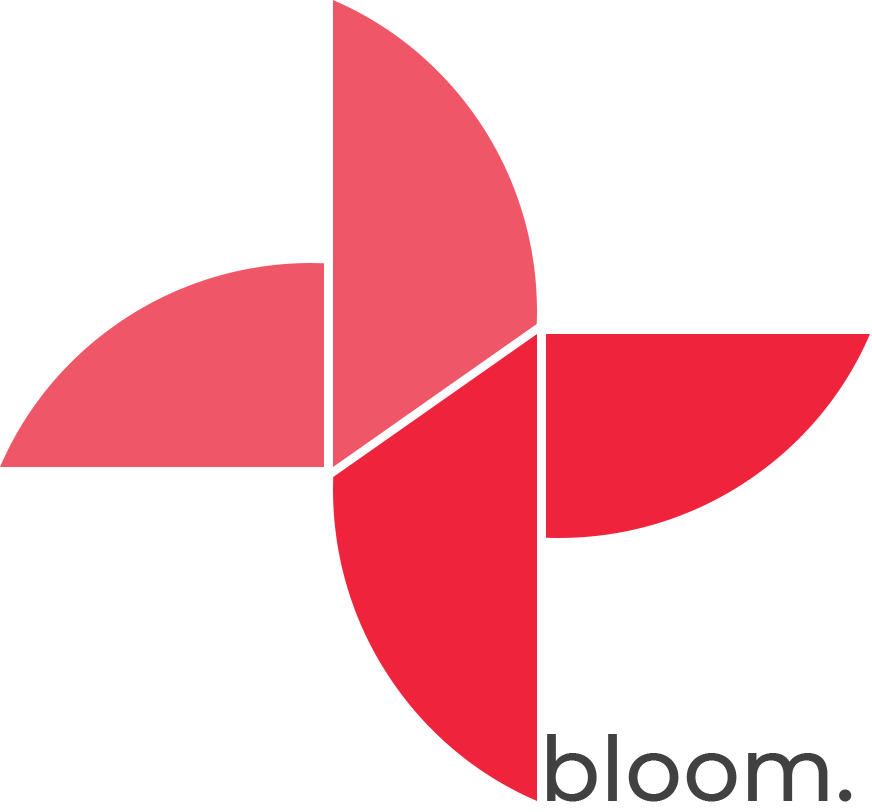
<style>
.page{position:relative;width:872px;height:812px;background:#ffffff}
.page>*{position:absolute;margin:0}
.t1{font:90px "Montserrat-Medium";color:#414141}
</style>
<div class="page">
<p class="t1" style="left:547px;top:734px;width:305px;height:68px">bloom.</p>
</div>
